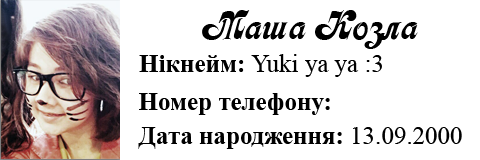
<style>
.page{position:relative;width:480px;height:160px;background:#ffffff}
.page>*{position:absolute;margin:0}
.t1{font:41.7px "Asessor";color:#000000}
.t2{font:25px "TimesNewRomanPSMT";color:#000000}
.t3{font:25px "TimesNewRomanPS-BoldMT";color:#000000}
</style>
<div class="page">
<p class="t1" style="left:202px;top:10px;width:216px;height:39px">Маша Козла</p>
<p class="t2" style="left:139px;top:54px;width:243px;height:23px"><span class="t3">Нікнейм: </span>Yuki ya ya :3</p>
<p class="t3" style="left:139px;top:93px;width:191px;height:22px">Номер телефону:</p>
<p class="t3" style="left:138px;top:127px;width:324px;height:22px">Дата народження: <span class="t2">13.09.2000</span></p>
</div>
